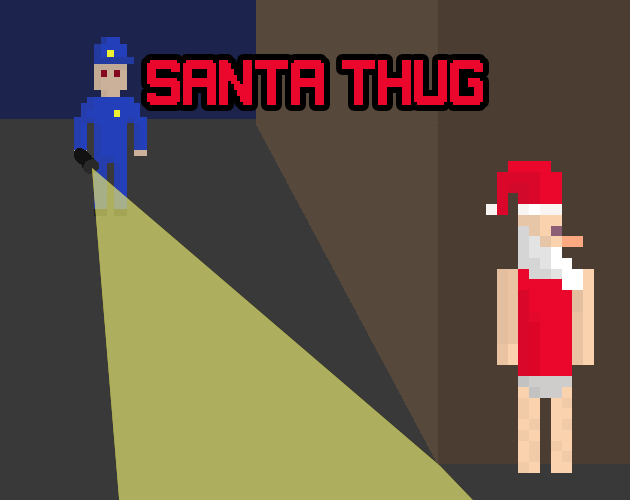
<style>
.page{position:relative;width:630px;height:500px;background:#393939}
.page>*{position:absolute;margin:0}
.t1{font:48px "Gameplay";color:#eb062c}
</style>
<div class="page">
<p class="t1" style="left:147px;top:60px;width:336px;height:45px">Santa Thug</p>
</div>
